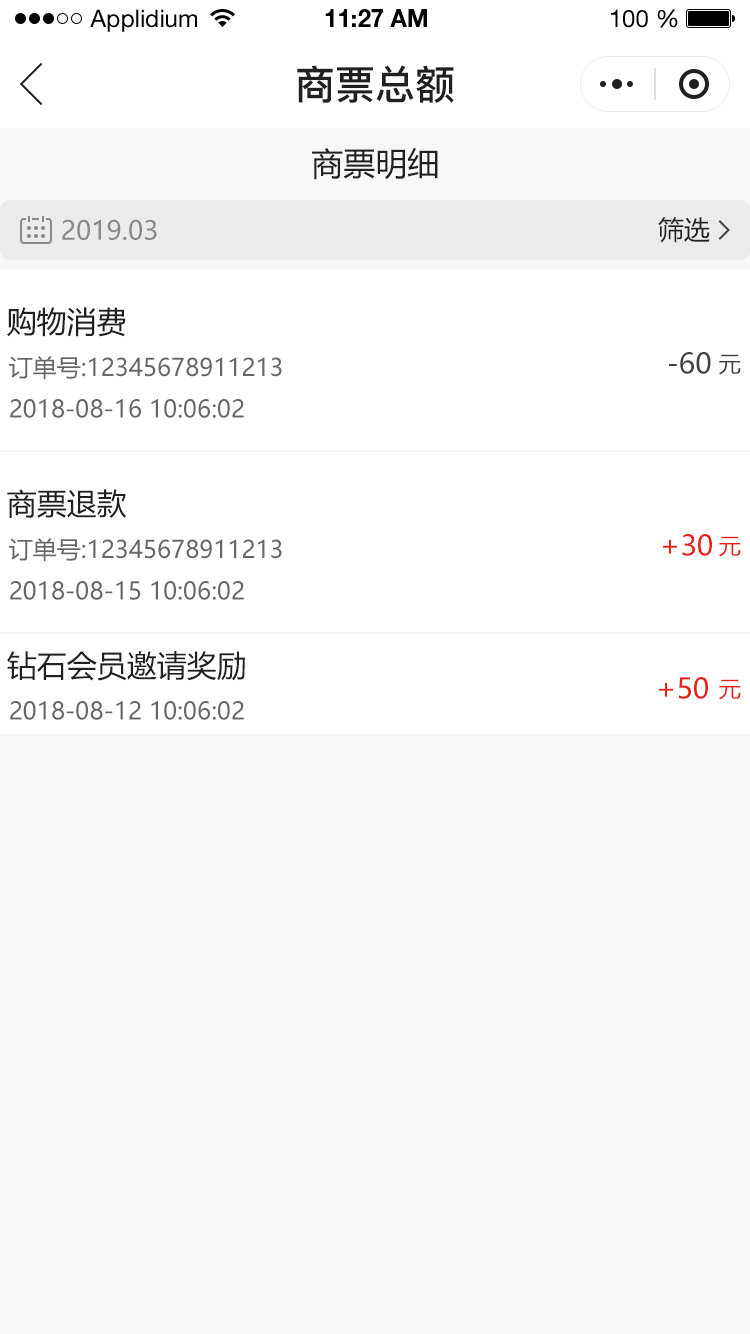
<style>
.page{position:relative;width:750px;height:1334px;background:#f7f7f7}
.page>*{position:absolute;margin:0}
.t1{font:24px "HelveticaNeueLTStd-Roman";color:#000000}
.t2{font:24px "HelveticaNeueLTStd-Bd";color:#000000}
.t3{font:40px "PingFang-SC-Bold";color:#202020;text-transform:uppercase}
.t4{font:32px "MicrosoftYaHei";color:#202020;text-transform:uppercase}
.t5{font:26px "MicrosoftYaHei";color:#888888;text-transform:uppercase}
.t6{font:26px "MicrosoftYaHei";color:#202020;text-transform:uppercase}
.t7{font:30px "MicrosoftYaHei";color:#202020;text-transform:uppercase}
.t8{font:28px "MicrosoftYaHei";color:#404040;text-transform:uppercase}
.t9{font:24px "MicrosoftYaHei";color:#666666;text-transform:uppercase}
.t10{font:22px "MicrosoftYaHei";color:#404040;text-transform:uppercase}
.t11{font:28px "MicrosoftYaHei";color:#e61f18;text-transform:uppercase}
.t12{font:22px "MicrosoftYaHei";color:#e61f18;text-transform:uppercase}
</style>
<div class="page">
<p class="t1" style="left:90px;top:9px;width:107px;height:23px">Applidium</p>
<p class="t2" style="left:325px;top:9px;width:102px;height:18px">11:27 AM</p>
<p class="t1" style="left:611px;top:9px;width:67px;height:19px">100 %</p>
<p class="t3" style="left:297px;top:65px;width:157px;height:38px">商票总额</p>
<p class="t4" style="left:312px;top:147px;width:126px;height:33px">商票明细</p>
<p class="t5" style="left:62px;top:219px;width:95px;height:21px">2019.03</p>
<p class="t6" style="left:658px;top:217px;width:52px;height:26px">筛选</p>
<p class="t7" style="left:7px;top:307px;width:119px;height:30px">购物消费</p>
<p class="t8" style="left:669px;top:352px;width:42px;height:22px">-60</p>
<p class="t9" style="left:9px;top:356px;width:273px;height:24px">订单号:12345678911213</p>
<p class="t10" style="left:719px;top:354px;width:22px;height:21px">元</p>
<p class="t9" style="left:10px;top:399px;width:234px;height:19px">2018-08-16 10:06:02</p>
<p class="t7" style="left:7px;top:489px;width:120px;height:29px">商票退款</p>
<p class="t11" style="left:663px;top:534px;width:49px;height:22px">+30</p>
<p class="t9" style="left:9px;top:538px;width:273px;height:24px">订单号:12345678911213</p>
<p class="t12" style="left:719px;top:536px;width:22px;height:21px">元</p>
<p class="t9" style="left:10px;top:581px;width:234px;height:19px">2018-08-15 10:06:02</p>
<p class="t7" style="left:7px;top:651px;width:238px;height:30px">钻石会员邀请奖励</p>
<p class="t11" style="left:659px;top:677px;width:49px;height:22px">+50</p>
<p class="t12" style="left:719px;top:679px;width:22px;height:21px">元</p>
<p class="t9" style="left:10px;top:701px;width:234px;height:19px">2018-08-12 10:06:02</p>
</div>
